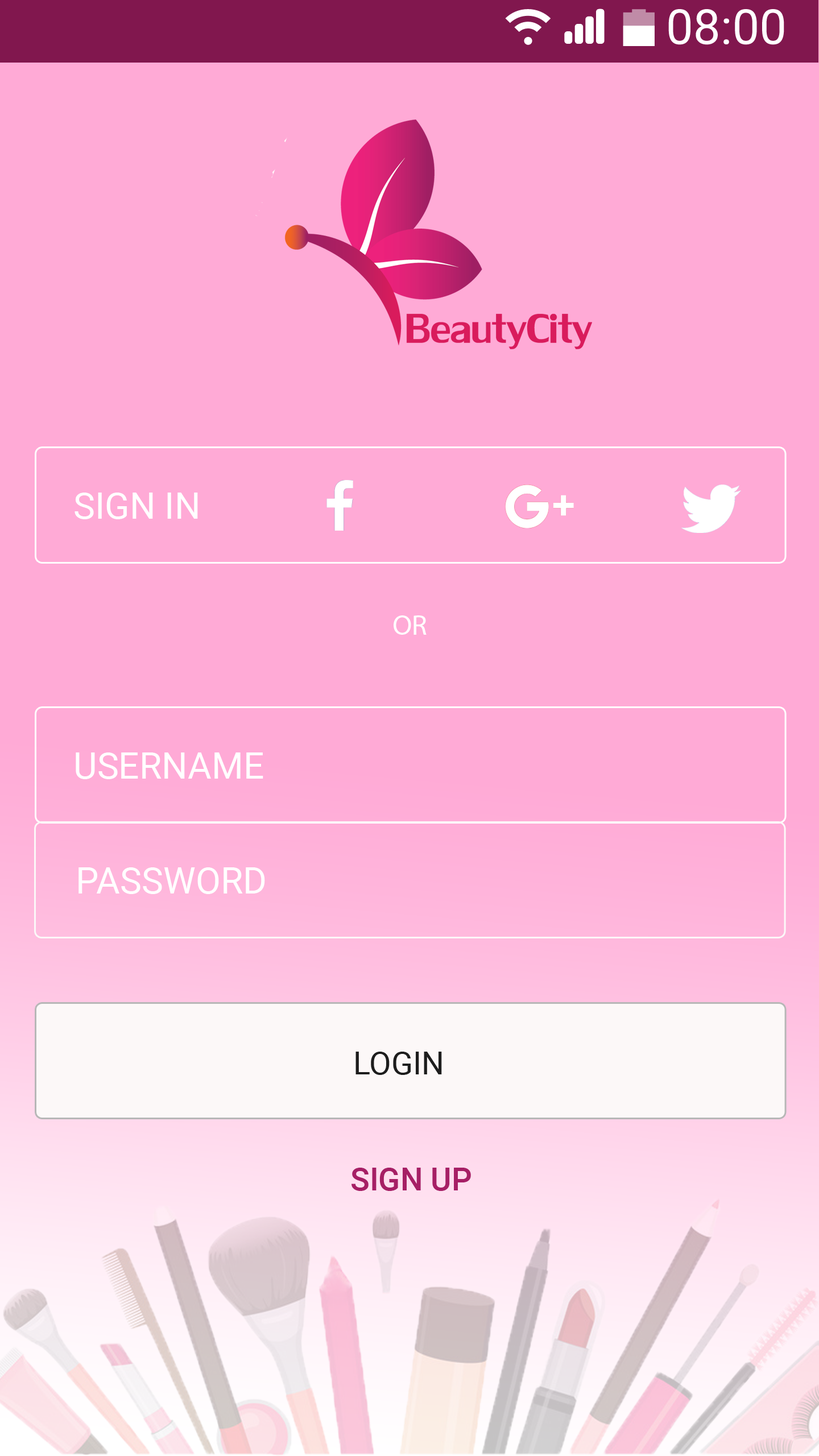
<style>
.page{position:relative;width:819px;height:1456px;background:#ffaad6}
.page>*{position:absolute;margin:0}
.t1{font:48.5px "Roboto-Regular";color:#ffffff}
.t2{font:36.4px "Roboto-Regular";color:#ffffff}
.t3{font:28.4px "MyriadPro-Regular";color:#ffffff}
.t4{font:31.8px "Roboto-Regular";color:#1d1d1d}
.t5{font:31.8px "Roboto-Medium";color:#a61f65}
</style>
<div class="page">
<p class="t1" style="left:668px;top:9px;width:116px;height:36px">08:00</p>
<p class="t2" style="left:75px;top:493px;width:123px;height:26px">SIGN IN</p>
<p class="t3" style="left:394px;top:615px;width:33px;height:20px">OR</p>
<p class="t2" style="left:76px;top:752px;width:187px;height:27px">USERNAME</p>
<p class="t2" style="left:78px;top:867px;width:187px;height:27px">PASSWORD</p>
<p class="t4" style="left:355px;top:1052px;width:87px;height:23px">LOGIN</p>
<p class="t5" style="left:351px;top:1168px;width:120px;height:23px">SIGN UP</p>
</div>
